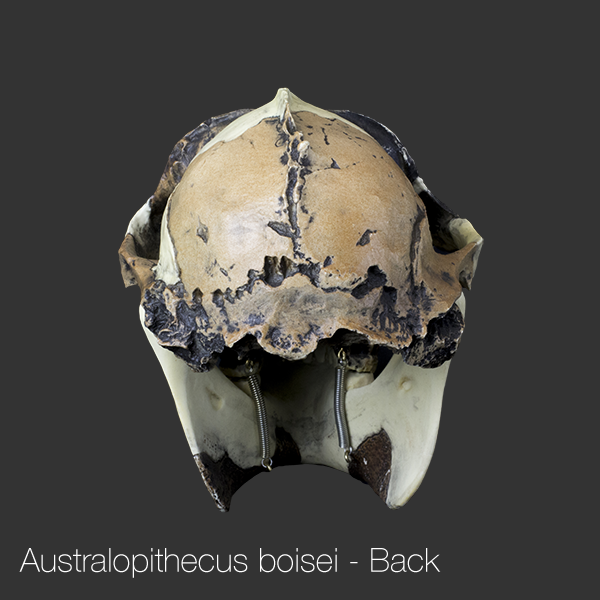
<style>
.page{position:relative;width:600px;height:600px;background:#333333}
.page>*{position:absolute;margin:0}
.t1{font:33.3px "HelveticaNeue-Thin";color:#ffffff}
</style>
<div class="page">
<p class="t1" style="left:19px;top:548px;width:422px;height:30px">Australopithecus boisei - Back</p>
</div>
